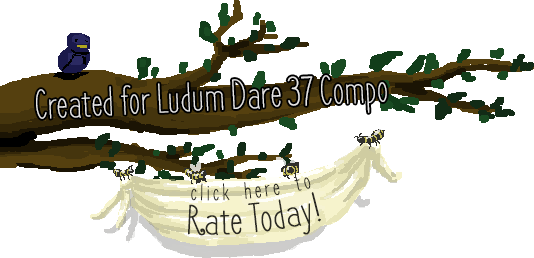
<style>
.page{position:relative;width:534px;height:258px;background:#ffffff}
.page>*{position:absolute;margin:0}
.t1{font:41.9px "Frenchpress";color:#e6e5e5}
.t2{font:24px/34.3px "Frenchpress";letter-spacing:0.12em;color:#2b2a23}
.t3{font:42px/34.3px "Frenchpress";color:#2b2a23}
</style>
<div class="page">
<p class="t1" style="left:36px;top:75px;width:351px;height:44px;rotate:-3deg">Created for Ludum Dare 37 Compo</p>
<p class="t2" style="left:188px;top:177px;width:133px;height:59px;text-align:center;rotate:-6deg">click here to<br><span class="t3">Rate Today!</span></p>
</div>
